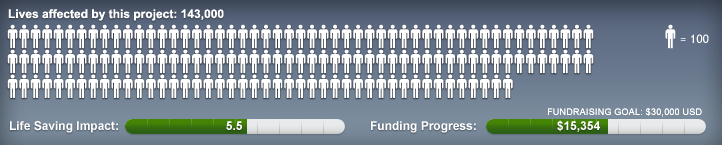
<style>
.page{position:relative;width:722px;height:145px}
.page>*{position:absolute;margin:0}
.t1{font:12px "Arial-BoldMT";color:#ffffff}
.t2{font:12px "TrebuchetMS";color:#ffffff}
.t3{font:9px "ArialMT";letter-spacing:0.025em;color:#ffffff}
</style>
<div class="page">
<p class="t1" style="left:8px;top:9px;width:216px;height:12px">Lives affected by this project: 143,000</p>
<p class="t2" style="left:680px;top:34px;width:29px;height:9px">= 100</p>
<p class="t3" style="left:548px;top:108px;width:154px;height:9px">FUNDRAISING GOAL: $30,000 USD</p>
<p class="t1" style="left:10px;top:121px;width:232px;height:12px">Life Saving Impact:                                5.5</p>
<p class="t1" style="left:371px;top:120px;width:229px;height:13px">Funding Progress:                        $15,354</p>
</div>
